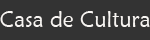
<style>
.page{position:relative;width:150px;height:40px;background:#333333}
.page>*{position:absolute;margin:0}
.t1{font:22px "MaiandraGD-Regular";color:#f8f5f2}
</style>
<div class="page">
<p class="t1" style="left:0px;top:11px;width:150px;height:16px">Casa de Cultura</p>
</div>
